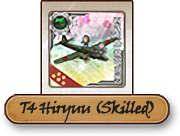
<style>
.page{position:relative;width:180px;height:136px;background:#ffffff}
.page>*{position:absolute;margin:0}
.t1{font:16px "VinerHandITC";letter-spacing:-0.08em;color:#1c1e1b;font-weight:bold}
</style>
<div class="page">
<p class="t1" style="left:19px;top:100px;width:135px;height:23px">T4 Hiryuu (Skilled)</p>
</div>
